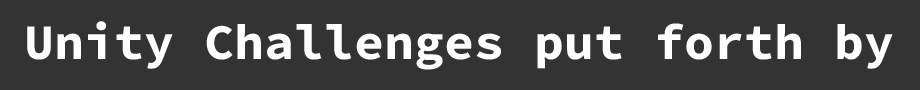
<style>
.page{position:relative;width:920px;height:90px;background:#333333}
.page>*{position:absolute;margin:0}
.t1{font:50px "SourceCodeRoman-Bold";color:#ffffff}
</style>
<div class="page">
<p class="t1" style="left:27px;top:21px;width:866px;height:49px">Unity Challenges put forth by</p>
</div>
